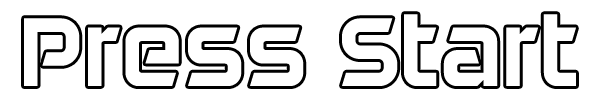
<style>
.page{position:relative;width:600px;height:100px;background:#ffffff}
.page>*{position:absolute;margin:0}
.t1{font:100px "DAGGERSQUARE";color:#ffffff}
</style>
<div class="page">
<p class="t1" style="left:24px;top:14px;width:552px;height:72px">Press Start</p>
</div>
